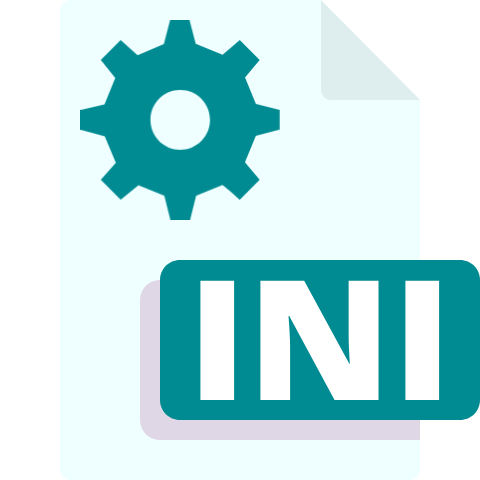
<style>
.page{position:relative;width:480px;height:480px;background:#efffff}
.page>*{position:absolute;margin:0}
.t1{font:167px "OpenSans-Extrabold";color:#ffffff;scale:1.04 1}
</style>
<div class="page">
<p class="t1" style="left:200px;top:280px;width:240px;height:120px">INI</p>
</div>
